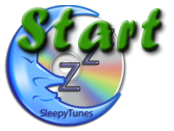
<style>
.page{position:relative;width:174px;height:131px;background:#ffffff}
.page>*{position:absolute;margin:0}
.t1{font:64px "ForteMT";letter-spacing:0.05em}
</style>
<div class="page">
<p class="t1" style="left:17px;top:7px;width:144px;height:45px">Start</p>
</div>
